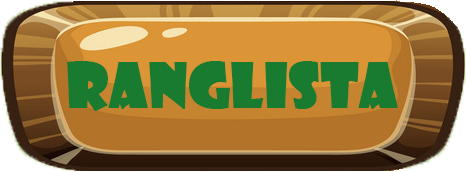
<style>
.page{position:relative;width:466px;height:172px}
.page>*{position:absolute;margin:0}
.t1{font:60px "ShowcardGothic-Reg";letter-spacing:0.001em;color:#197b30;font-weight:bold}
</style>
<div class="page">
<p class="t1" style="left:67px;top:61px;width:331px;height:50px">RANGLISTA</p>
</div>
